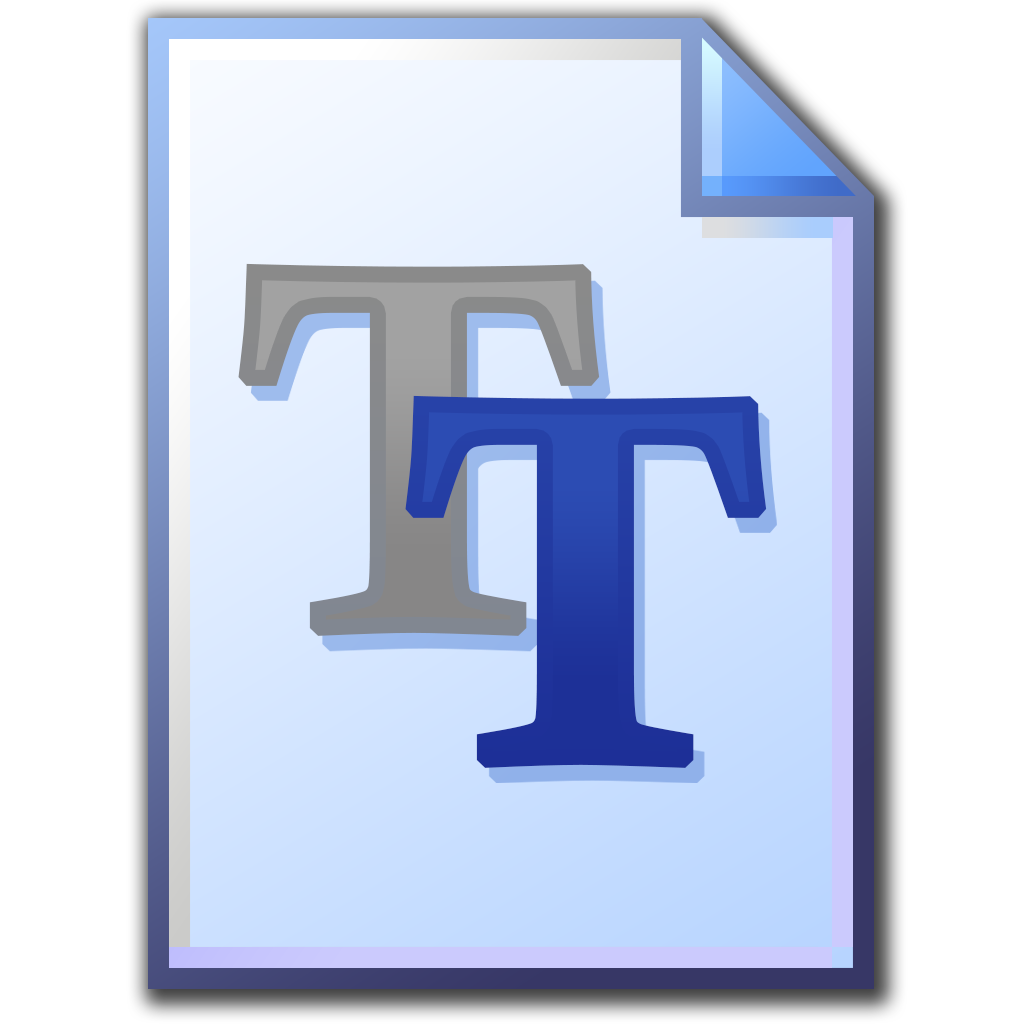
<style>
.page{position:relative;width:1024px;height:1024px;background:#ffffff}
.page>*{position:absolute;margin:0}
.t1{font:513.7px "CalisMTBol";font-weight:bold;scale:1.06 1}
.t2{font:513.7px "CalisMTBol";color:#253fa6;font-weight:bold;scale:1.06 1}
</style>
<div class="page">
<p class="t1" style="left:238px;top:263px;width:362px;height:373px">T</p>
<p class="t2" style="left:405px;top:395px;width:362px;height:373px">T</p>
</div>
